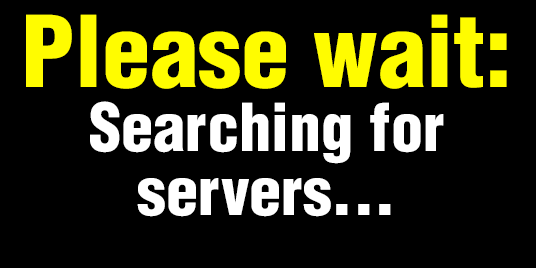
<style>
.page{position:relative;width:536px;height:268px;background:#000000}
.page>*{position:absolute;margin:0}
.t1{font:64.3px/64.3px "Helvetica-CondensedBlack";color:#ffffff}
.t2{font:96.5px "Helvetica-CondensedBlack";color:#fffc00}
</style>
<div class="page">
<p class="t1" style="left:26px;top:14px;width:481px;height:203px;text-align:center"><span class="t2">Please wait: </span>Searching for servers...</p>
</div>
